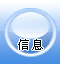
<style>
.page{position:relative;width:60px;height:64px}
.page>*{position:absolute;margin:0}
.t1{font:12px "SimSun";letter-spacing:0.2em;color:#000306}
</style>
<div class="page">
<p class="t1" style="left:18px;top:39px;width:25px;height:11px">信息</p>
</div>
